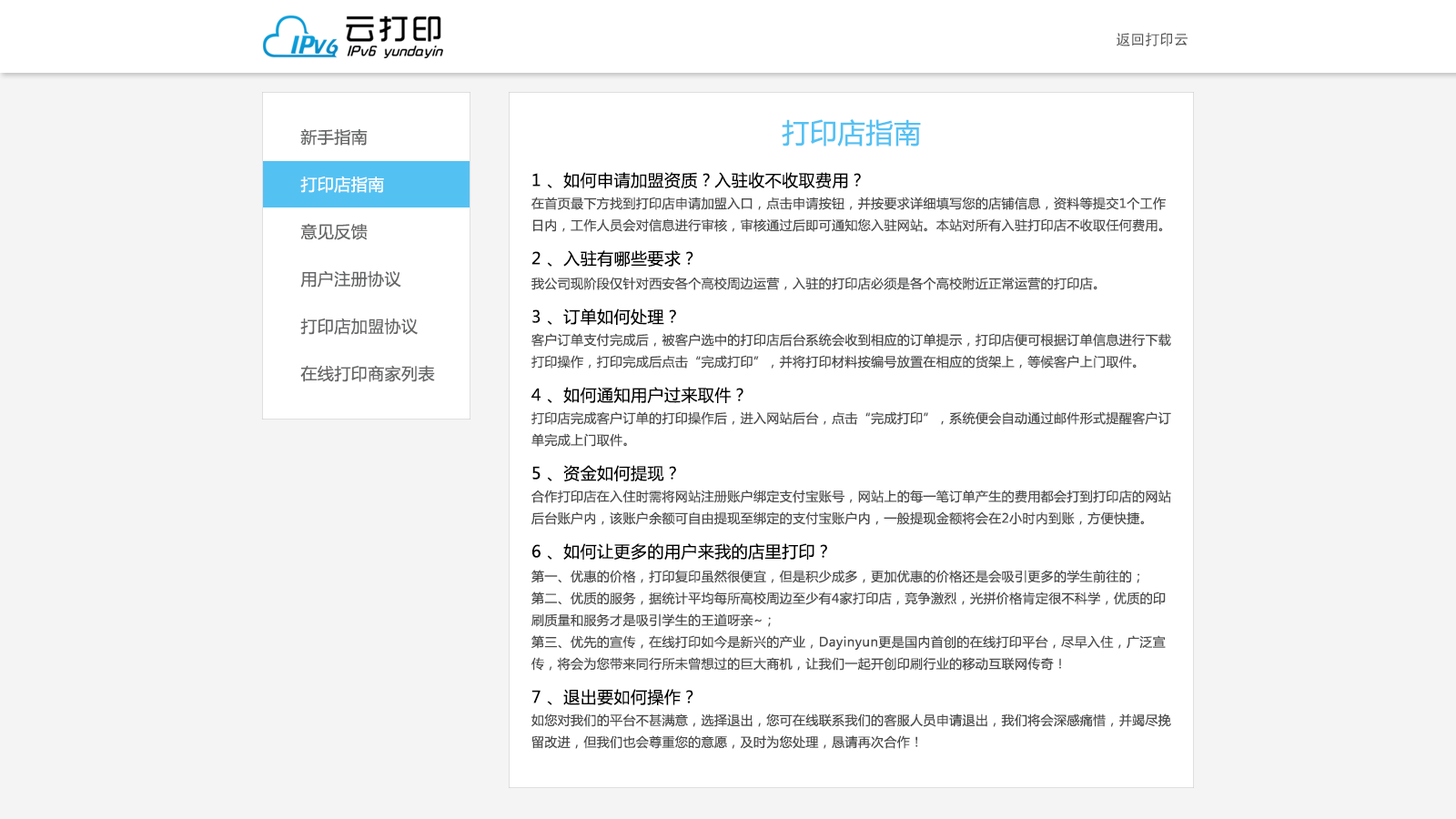
<style>
.page{position:relative;width:1456px;height:819px;background:#f4f4f4}
.page>*{position:absolute;margin:0}
.t1{font:14.9px "AdobeHeitiStd-Regular";letter-spacing:-0.025em;color:#565656}
.t2{font:12.7px/21.8px "MicrosoftYaHei";letter-spacing:0.025em;color:#4c4c4c}
.t3{font:27.3px/43.7px "MicrosoftYaHei";letter-spacing:0.025em;color:#54c1f3}
.t4{font:16.4px/43.7px "MicrosoftYaHei";letter-spacing:0.025em;color:#020202}
.t5{font:16.4px/32.8px "MicrosoftYaHei";letter-spacing:0.025em;color:#000000}
.t6{font:16.4px/47.3px "MicrosoftYaHei";letter-spacing:0.025em;color:#656667}
.t7{font:16.4px/47.3px "MicrosoftYaHei";letter-spacing:0.025em;color:#feffff}
</style>
<div class="page">
<p class="t1" style="left:1116px;top:33px;width:72px;height:13px">返回打印云</p>
<p class="t2" style="left:531px;top:119px;width:640px;height:630px;text-align:center"><span class="t3">打印店指南<br></span><span class="t4">1 、如何申请加盟资质？入驻收不收取费用？<br></span>在首页最下方找到打印店申请加盟入口，点击申请按钮，并按要求详细填写您的店铺信息，资料等提交1个工作日内，工作人员会对信息进行审核，审核通过后即可通知您入驻网站。本站对所有入驻打印店不收取任何费用。<br><span class="t5">2 、入驻有哪些要求？<br></span>我公司现阶段仅针对西安各个高校周边运营，入驻的打印店必须是各个高校附近正常运营的打印店。<br><span class="t5">3 、订单如何处理？<br></span>客户订单支付完成后，被客户选中的打印店后台系统会收到相应的订单提示，打印店便可根据订单信息进行下载打印操作，打印完成后点击“完成打印”，并将打印材料按编号放置在相应的货架上，等候客户上门取件。<br><span class="t5">4 、如何通知用户过来取件？<br></span>打印店完成客户订单的打印操作后，进入网站后台，点击“完成打印”，系统便会自动通过邮件形式提醒客户订单完成上门取件。<br><span class="t5">5 、资金如何提现？<br></span>合作打印店在入住时需将网站注册账户绑定支付宝账号，网站上的每一笔订单产生的费用都会打到打印店的网站后台账户内，该账户余额可自由提现至绑定的支付宝账户内，一般提现金额将会在2小时内到账，方便快捷。<br><span class="t5">6 、如何让更多的用户来我的店里打印？<br></span>第一、优惠的价格，打印复印虽然很便宜，但是积少成多，更加优惠的价格还是会吸引更多的学生前往的；<br>第二、优质的服务，据统计平均每所高校周边至少有4家打印店，竞争激烈，光拼价格肯定很不科学，优质的印刷质量和服务才是吸引学生的王道呀亲~；<br>第三、优先的宣传，在线打印如今是新兴的产业，Dayinyun更是国内首创的在线打印平台，尽早入住，广泛宣传，将会为您带来同行所未曾想过的巨大商机，让我们一起开创印刷行业的移动互联网传奇！<br><span class="t5">7 、退出要如何操作？<br></span>如您对我们的平台不甚满意，选择退出，您可在线联系我们的客服人员申请退出，我们将会深感痛惜，并竭尽挽留改进，但我们也会尊重您的意愿，及时为您处理，恳请再次合作！</p>
<p class="t6" style="left:300px;top:128px;width:135px;height:254px">新手指南<br><span class="t7">打印店指南<br></span>意见反馈<br>用户注册协议<br>打印店加盟协议<br>在线打印商家列表</p>
</div>
